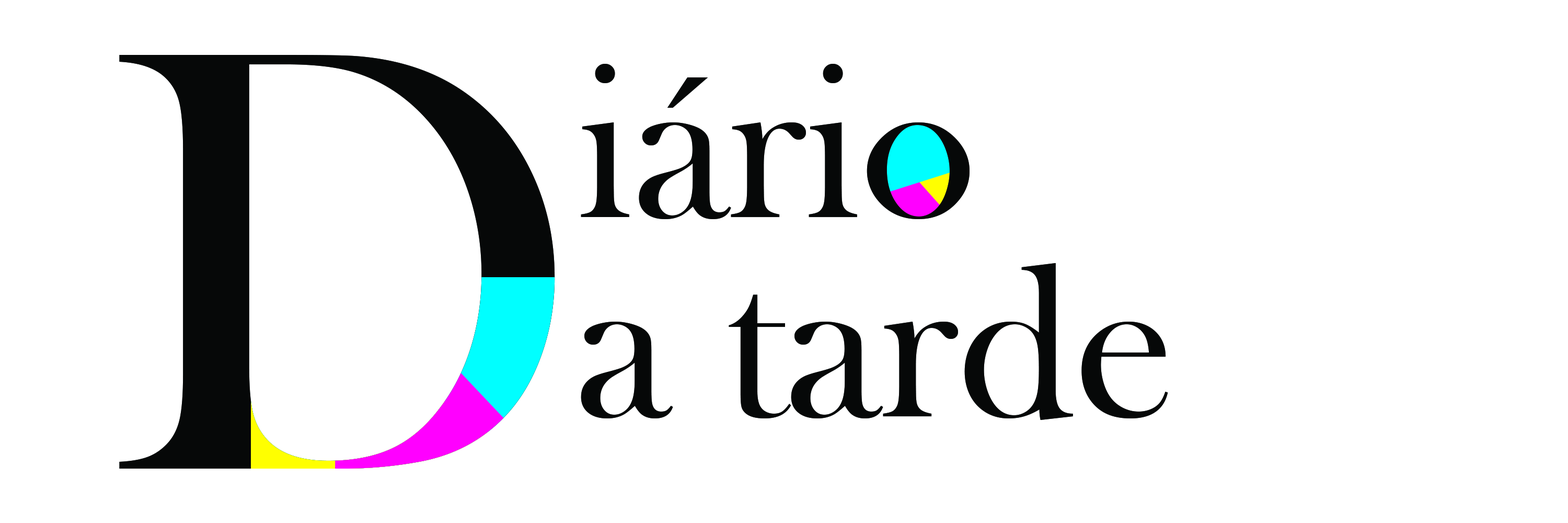
<style>
.page{position:relative;width:1568px;height:523px;background:#ffffff}
.page>*{position:absolute;margin:0}
.t1{font:620.3px "BaskOldFace";color:#060808}
.t2{font:224.5px "BaskOldFace";color:#060808}
</style>
<div class="page">
<p class="t1" style="left:119px;top:55px;width:436px;height:413px">D</p>
<p class="t2" style="left:581px;top:64px;width:389px;height:155px">iário</p>
<p class="t2" style="left:581px;top:263px;width:587px;height:157px">a tarde</p>
</div>
